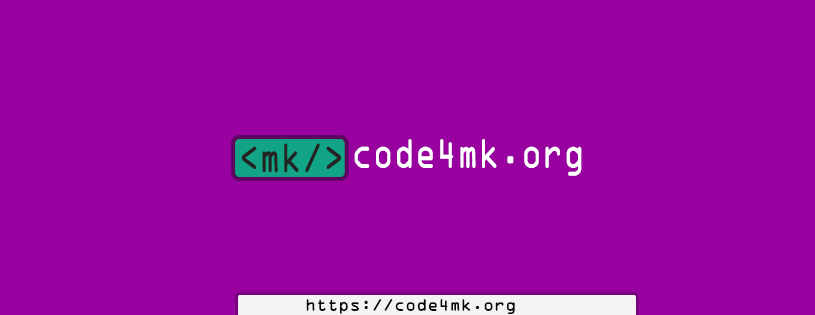
<style>
.page{position:relative;width:815px;height:315px;background:#9800a0}
.page>*{position:absolute;margin:0}
.t1{font:44.1px "OCRAbyBT-Regular";color:#242323;scale:0.78 1}
.t2{font:44.1px "OCRAbyBT-Regular";color:#ffffff;scale:0.78 1}
.t3{font:18px "OCRAbyBT-Regular";color:#070707}
</style>
<div class="page">
<p class="t1" style="left:241px;top:143px;width:100px;height:30px">&lt;mk/&gt;</p>
<p class="t2" style="left:354px;top:139px;width:228px;height:37px">code4mk.org</p>
<p class="t3" style="left:306px;top:299px;width:209px;height:15px">https://code4mk.org</p>
</div>
